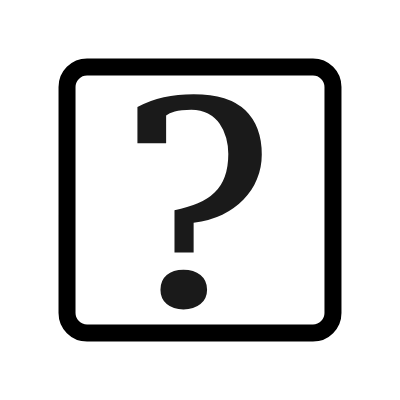
<style>
.page{position:relative;width:400px;height:400px;background:#ffffff}
.page>*{position:absolute;margin:0}
.t1{font:298.9px "PTSerif-Caption";color:#1a1a1a}
</style>
<div class="page">
<p class="t1" style="left:137px;top:94px;width:125px;height:216px">?</p>
</div>
